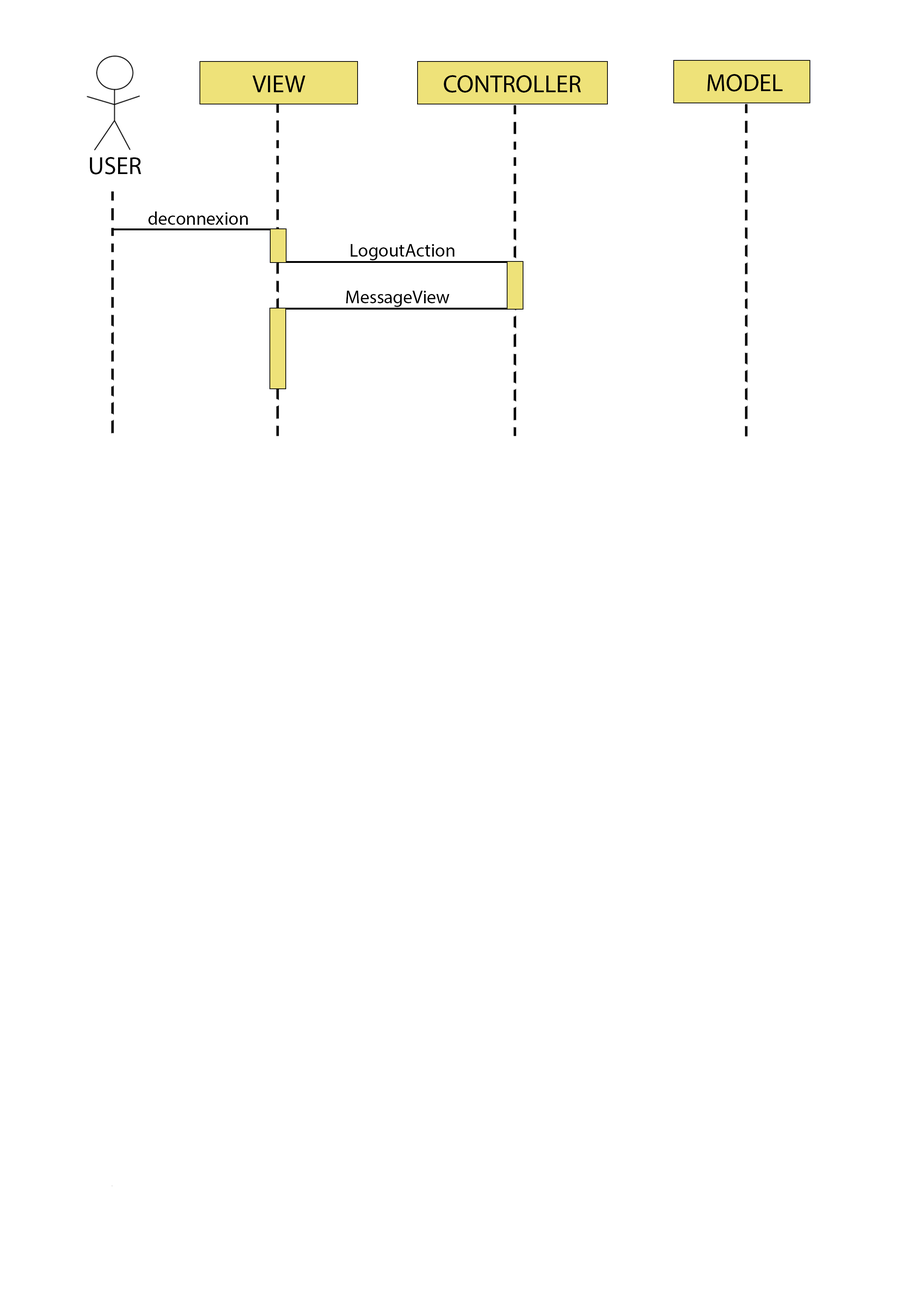
<style>
.page{position:relative;width:918px;height:1299px;background:#ffffff}
.page>*{position:absolute;margin:0}
.t1{font:24.7px "MyriadPro-Regular";color:#000000}
.t2{font:18.5px "MyriadPro-Regular";color:#000000}
</style>
<div class="page">
<p class="t1" style="left:252px;top:76px;width:53px;height:16px">VIEW</p>
<p class="t1" style="left:444px;top:75px;width:137px;height:18px">CONTROLLER</p>
<p class="t1" style="left:707px;top:74px;width:76px;height:17px">MODEL</p>
<p class="t1" style="left:90px;top:157px;width:51px;height:17px">USER</p>
<p class="t2" style="left:148px;top:211px;width:100px;height:14px">deconnexion</p>
<p class="t2" style="left:351px;top:244px;width:104px;height:16px">LogoutAction</p>
<p class="t2" style="left:346px;top:291px;width:103px;height:16px">MessageView</p>
</div>
